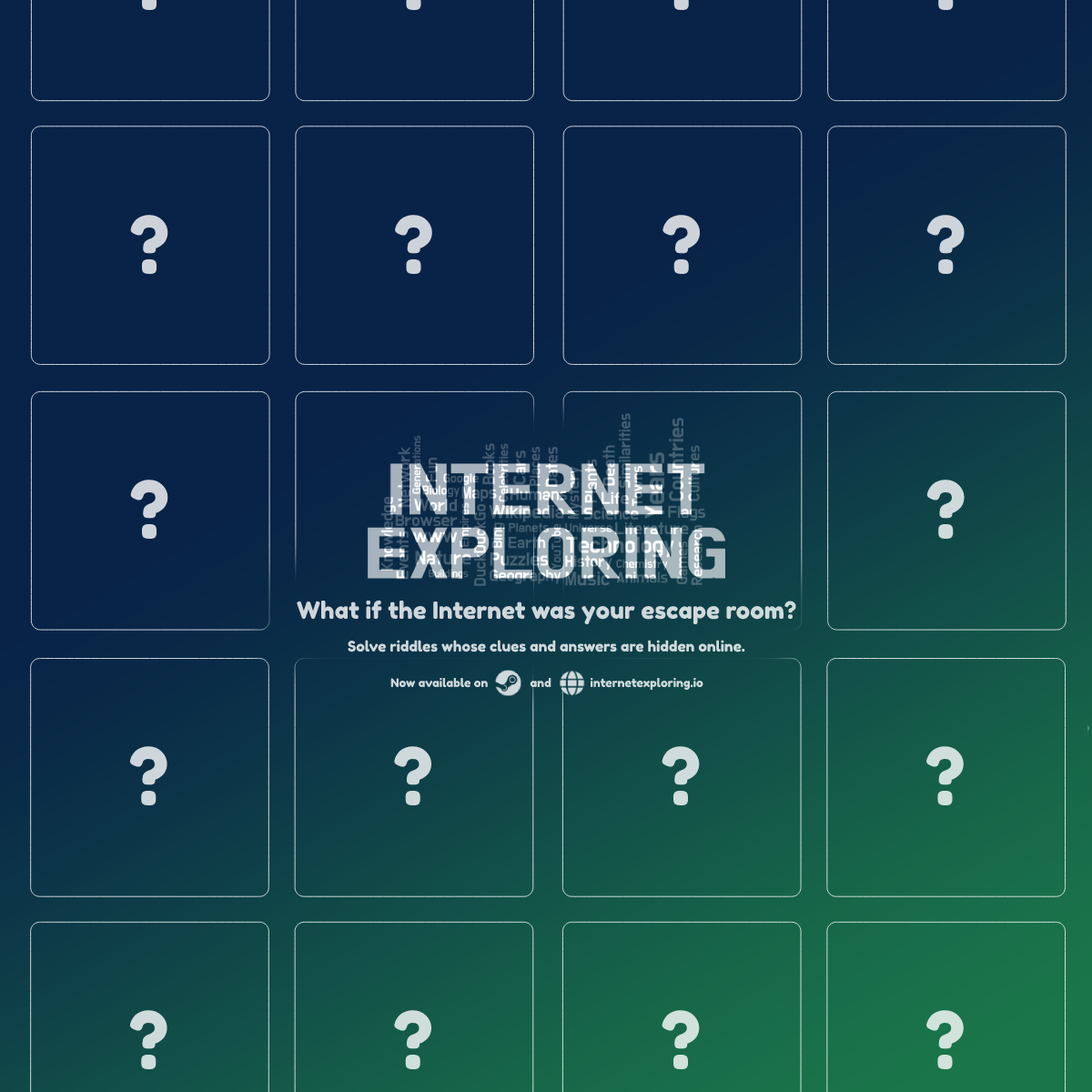
<style>
.page{position:relative;width:1092px;height:1092px;background:#082347}
.page>*{position:absolute;margin:0}
.t1{font:78.6px "FredokaOne-Regular";color:#ced3da}
.t2{font:78.6px "FredokaOne-Regular";color:#ced5da}
.t3{font:78.6px "FredokaOne-Regular";color:#cfd9da}
.t4{font:23.7px "FredokaOne-Regular";color:#ced7da}
.t5{font:14.6px "FredokaOne-Regular";color:#cfd8da}
.t6{font:11.8px "FredokaOne-Regular";color:#cfd8da}
.t7{font:78.6px "FredokaOne-Regular";color:#ced6da}
.t8{font:78.6px "FredokaOne-Regular";color:#d0dcdb}
.t9{font:78.6px "FredokaOne-Regular";color:#d0dfdb}
.t10{font:78.6px "FredokaOne-Regular";color:#cfdbda}
.t11{font:78.6px "FredokaOne-Regular";color:#d0dedb}
.t12{font:78.6px "FredokaOne-Regular";color:#d1e1db}
.t13{font:78.6px "FredokaOne-Regular";color:#d1e3db}
</style>
<div class="page">
<p class="t1" style="left:130px;top:215px;width:38px;height:59px">?</p>
<p class="t1" style="left:395px;top:215px;width:37px;height:59px">?</p>
<p class="t1" style="left:662px;top:215px;width:38px;height:59px">?</p>
<p class="t2" style="left:926px;top:215px;width:39px;height:59px">?</p>
<p class="t1" style="left:130px;top:480px;width:38px;height:59px">?</p>
<p class="t3" style="left:926px;top:480px;width:39px;height:59px">?</p>
<p class="t4" style="left:297px;top:600px;width:499px;height:25px">What if the Internet was your escape room?</p>
<p class="t5" style="left:348px;top:640px;width:397px;height:12px">Solve riddles whose clues and answers are hidden online.</p>
<p class="t6" style="left:390px;top:677px;width:313px;height:13px">Now available on              and             internetexploring.io</p>
<p class="t7" style="left:129px;top:746px;width:38px;height:59px">?</p>
<p class="t3" style="left:394px;top:746px;width:37px;height:59px">?</p>
<p class="t8" style="left:662px;top:746px;width:38px;height:59px">?</p>
<p class="t9" style="left:926px;top:746px;width:38px;height:59px">?</p>
<p class="t10" style="left:129px;top:1010px;width:38px;height:59px">?</p>
<p class="t11" style="left:394px;top:1010px;width:37px;height:59px">?</p>
<p class="t12" style="left:662px;top:1010px;width:38px;height:59px">?</p>
<p class="t13" style="left:926px;top:1010px;width:38px;height:59px">?</p>
</div>
